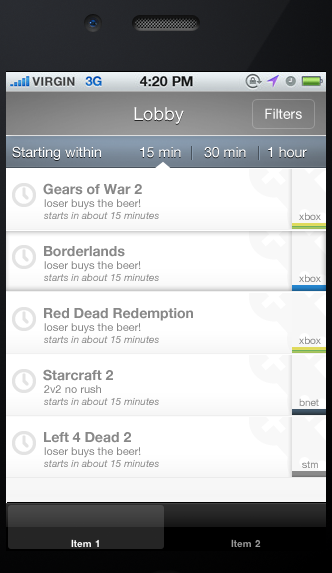
<style>
.page{position:relative;width:332px;height:573px;background:#ffffff}
.page>*{position:absolute;margin:0}
.t1{font:18px "HelveticaNeue";color:#ffffff}
.t2{font:14px "HelveticaNeue";color:#ffffff}
.t3{font:14px "HelveticaNeue-Bold";color:#888888}
.t4{font:11px "HelveticaNeue";color:#888888}
.t5{font:10px "HelveticaNeue-Italic";color:#888888}
.t6{font:10px "HelveticaNeue";color:#888888}
</style>
<div class="page">
<p class="t1" style="left:134px;top:107px;width:50px;height:17px">Lobby</p>
<p class="t2" style="left:265px;top:108px;width:37px;height:11px">Filters</p>
<p class="t2" style="left:12px;top:146px;width:89px;height:14px">Starting within</p>
<p class="t2" style="left:140px;top:147px;width:41px;height:11px">15 min</p>
<p class="t2" style="left:204px;top:147px;width:42px;height:11px">30 min</p>
<p class="t2" style="left:268px;top:147px;width:39px;height:11px">1 hour</p>
<p class="t3" style="left:43px;top:183px;width:99px;height:12px">Gears of War 2</p>
<p class="t4" style="left:44px;top:199px;width:97px;height:11px">loser buys the beer!</p>
<p class="t5" style="left:44px;top:211px;width:115px;height:8px">starts in about 15 minutes</p>
<p class="t6" style="left:299px;top:212px;width:22px;height:8px">xbox</p>
<p class="t3" style="left:44px;top:246px;width:81px;height:11px">Borderlands</p>
<p class="t4" style="left:44px;top:261px;width:97px;height:11px">loser buys the beer!</p>
<p class="t5" style="left:44px;top:273px;width:115px;height:8px">starts in about 15 minutes</p>
<p class="t6" style="left:299px;top:274px;width:22px;height:8px">xbox</p>
<p class="t3" style="left:44px;top:308px;width:149px;height:13px">Red Dead Redemption</p>
<p class="t4" style="left:44px;top:323px;width:97px;height:11px">loser buys the beer!</p>
<p class="t5" style="left:44px;top:335px;width:115px;height:8px">starts in about 15 minutes</p>
<p class="t6" style="left:299px;top:336px;width:22px;height:8px">xbox</p>
<p class="t3" style="left:43px;top:369px;width:70px;height:12px">Starcraft 2</p>
<p class="t4" style="left:44px;top:385px;width:57px;height:8px">2v2 no rush</p>
<p class="t5" style="left:44px;top:397px;width:115px;height:8px">starts in about 15 minutes</p>
<p class="t6" style="left:299px;top:398px;width:20px;height:8px">bnet</p>
<p class="t3" style="left:44px;top:432px;width:87px;height:11px">Left 4 Dead 2</p>
<p class="t4" style="left:44px;top:447px;width:97px;height:11px">loser buys the beer!</p>
<p class="t5" style="left:44px;top:459px;width:115px;height:8px">starts in about 15 minutes</p>
<p class="t6" style="left:302px;top:461px;width:16px;height:7px">stm</p>
</div>
